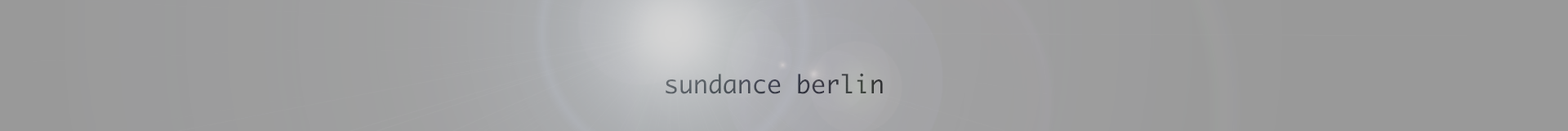
<style>
.page{position:relative;width:1568px;height:131px;background:#999999}
.page>*{position:absolute;margin:0}
.t1{font:24.5px "Monaco"}
</style>
<div class="page">
<p class="t1" style="left:666px;top:73px;width:217px;height:21px">sundance berlin</p>
</div>
